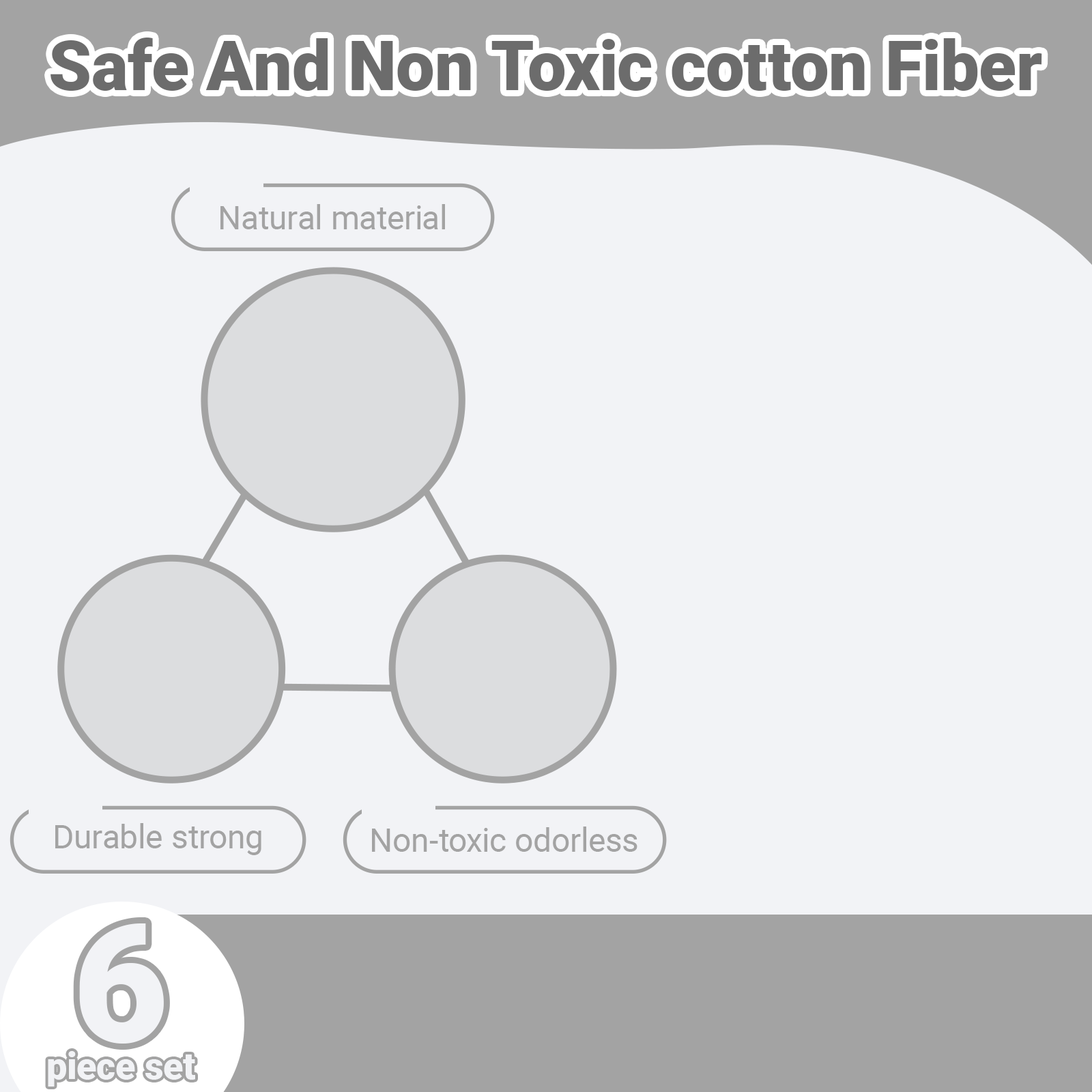
<style>
.page{position:relative;width:1092px;height:1092px;background:#f2f3f6}
.page>*{position:absolute;margin:0}
.t1{font:69.2px "Roboto-Black";color:#6c6c6c}
.t2{font:33px "Roboto-Regular";color:#a3a3a3}
.t3{font:164.3px "Roboto-Black";color:#f2f3f6}
.t4{font:37.1px "Roboto-Black";color:#f2f3f6}
</style>
<div class="page">
<p class="t1" style="left:51px;top:38px;width:991px;height:53px">Safe And Non Toxic cotton Fiber</p>
<p class="t2" style="left:220px;top:204px;width:225px;height:25px">Natural material</p>
<p class="t2" style="left:55px;top:823px;width:206px;height:32px">Durable strong</p>
<p class="t2" style="left:372px;top:826px;width:265px;height:26px">Non-toxic odorless</p>
<p class="t3" style="left:79px;top:923px;width:85px;height:121px">6</p>
<p class="t4" style="left:48px;top:1051px;width:147px;height:36px">piece set</p>
</div>
